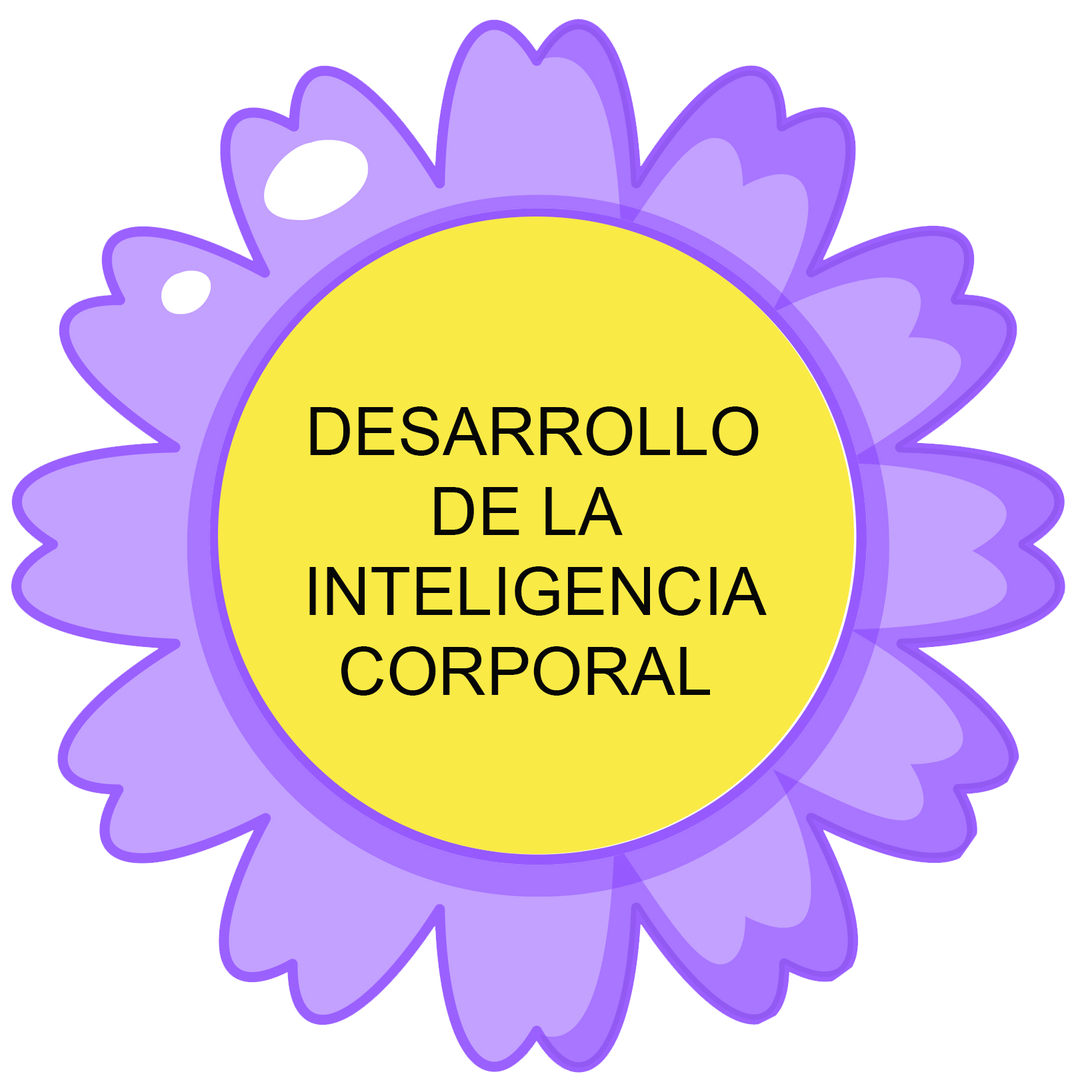
<style>
.page{position:relative;width:1092px;height:1092px;background:#ffffff}
.page>*{position:absolute;margin:0}
.t1{font:66.6px "ArialMT";color:#060606}
</style>
<div class="page">
<p class="t1" style="left:309px;top:407px;width:457px;height:289px;text-align:center">DESARROLLO<br>DE LA <br>INTELIGENCIA<br>CORPORAL</p>
</div>
